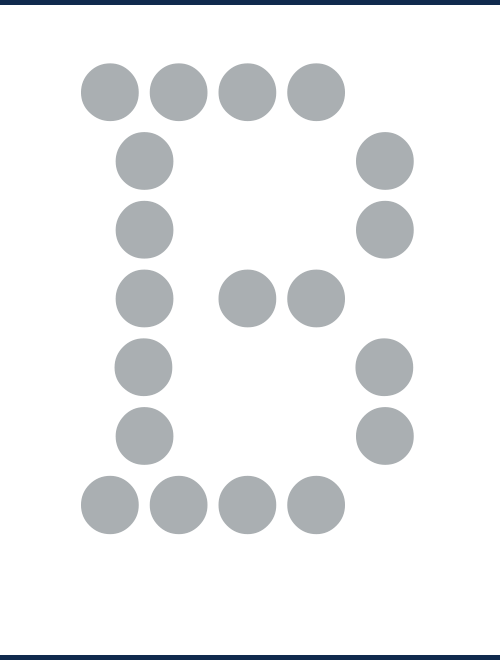
<style>
.page{position:relative;width:500px;height:660px;background:#ffffff}
.page>*{position:absolute;margin:0}
.t1{font:550px "DotMatrix-Regular";color:#aaafb2}
</style>
<div class="page">
<p class="t1" style="left:81px;top:63px;width:333px;height:472px">B</p>
</div>
